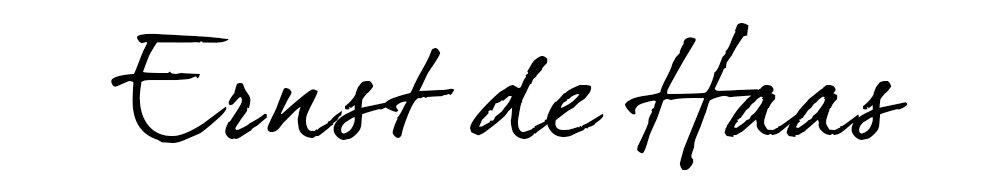
<style>
.page{position:relative;width:1000px;height:186px;background:#ffffff}
.page>*{position:absolute;margin:0}
.t1{font:140px "DearJoe4full";color:#000000}
</style>
<div class="page">
<p class="t1" style="left:111px;top:23px;width:797px;height:147px">Ernst de Haas</p>
</div>
